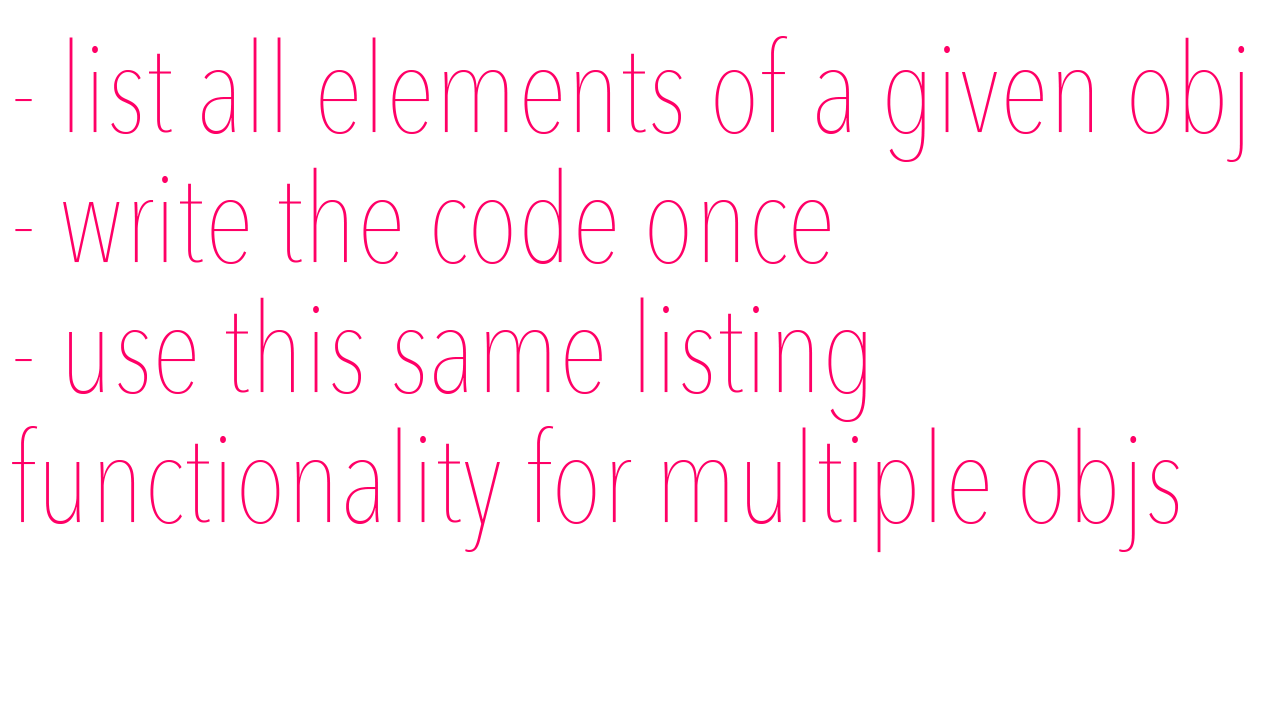
<style>
.page{position:relative;width:1280px;height:720px;background:#ffffff}
.page>*{position:absolute;margin:0}
.t1{font:125px "AvenirNextCondensed-UltraLight";color:#ff0066}
</style>
<div class="page">
<p class="t1" style="left:12px;top:36px;width:1233px;height:517px">- list all elements of a given obj<br>- write the code once <br>- use this same listing <br>functionality for multiple objs</p>
</div>
